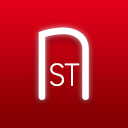
<style>
.page{position:relative;width:128px;height:128px}
.page>*{position:absolute;margin:0}
.t1{font:130px "UniSansThin";color:#ffffff;font-weight:bold}
.t2{font:30px "UniSansThin";color:#ffffff;font-weight:bold;scale:0.88 1}
</style>
<div class="page">
<p class="t1" style="left:38px;top:27px;width:51px;height:73px">n</p>
<p class="t2" style="left:50px;top:63px;width:30px;height:23px">ST</p>
</div>
